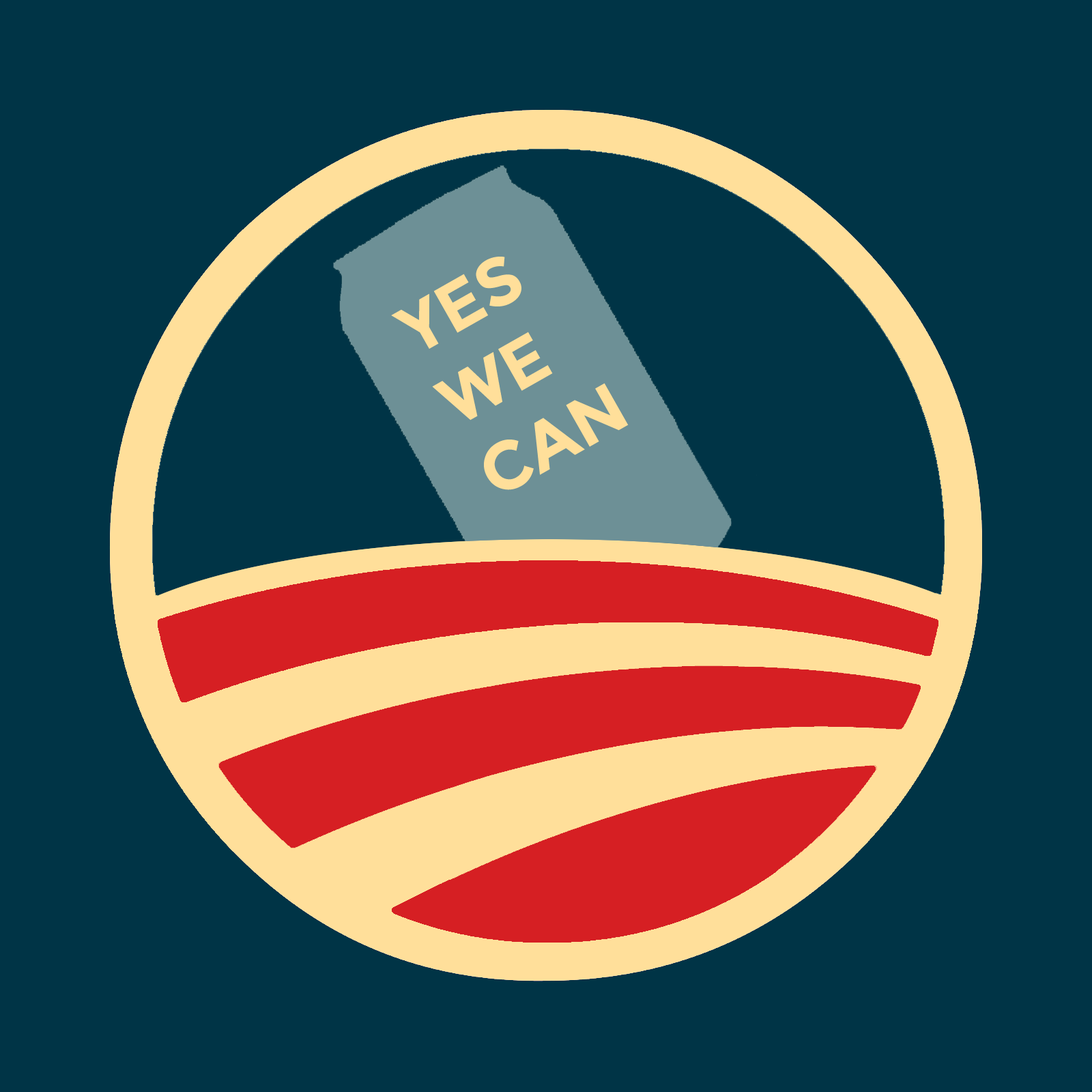
<style>
.page{position:relative;width:1092px;height:1092px;background:#003446}
.page>*{position:absolute;margin:0}
.t1{font:68.5px "Montserrat-Bold";color:#ffdf9a}
</style>
<div class="page">
<p class="t1" style="left:391px;top:257px;width:238px;height:233px;rotate:-30deg">YES<br>WE<br>CAN</p>
</div>
